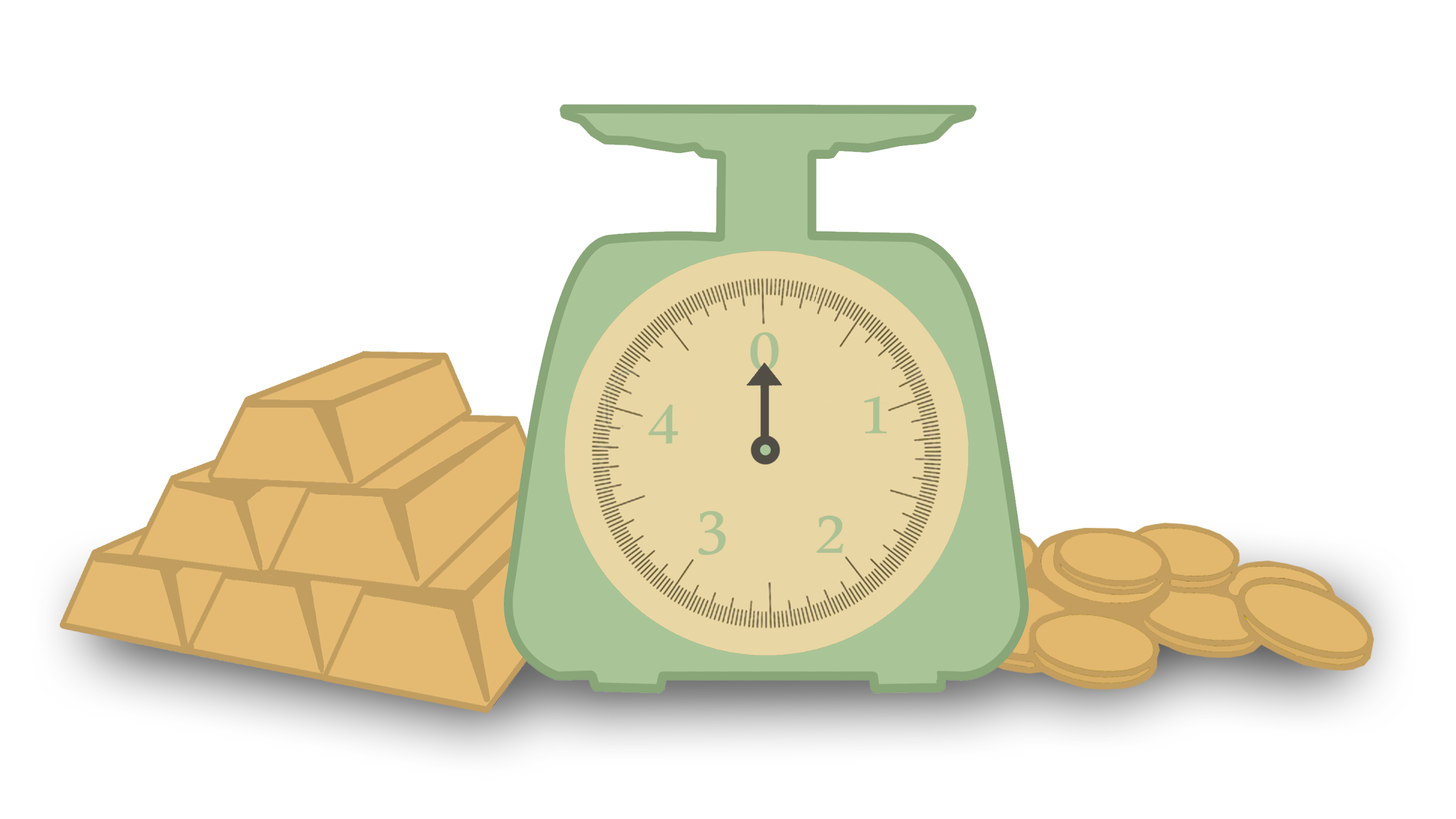
<style>
.page{position:relative;width:1456px;height:819px;background:#ffffff}
.page>*{position:absolute;margin:0}
.t1{font:90.1px "MicrosoftUighur";color:#acc294}
</style>
<div class="page">
<p class="t1" style="left:750px;top:332px;width:29px;height:39px">0</p>
<p class="t1" style="left:864px;top:396px;width:23px;height:37px">1</p>
<p class="t1" style="left:648px;top:404px;width:31px;height:40px">4</p>
<p class="t1" style="left:698px;top:510px;width:28px;height:45px">3</p>
<p class="t1" style="left:816px;top:515px;width:28px;height:38px">2</p>
</div>
